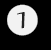
<style>
.page{position:relative;width:51px;height:50px;background:#000000}
.page>*{position:absolute;margin:0}
.t1{font:45px "Gabriola";color:#212121;scale:1.03 1}
</style>
<div class="page">
<p class="t1" style="left:17px;top:12px;width:8px;height:17px">1</p>
</div>
